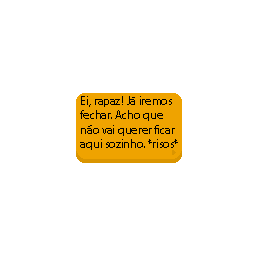
<style>
.page{position:relative;width:256px;height:256px;background:#ffffff}
.page>*{position:absolute;margin:0}
.t1{font:12px "MyriadPro-Regular";color:#000000}
</style>
<div class="page">
<p class="t1" style="left:80px;top:96px;width:98px;height:54px">Ei, rapaz! Já iremos fechar. Acho que não vai querer ficar aqui sozinho. *risos*</p>
</div>
